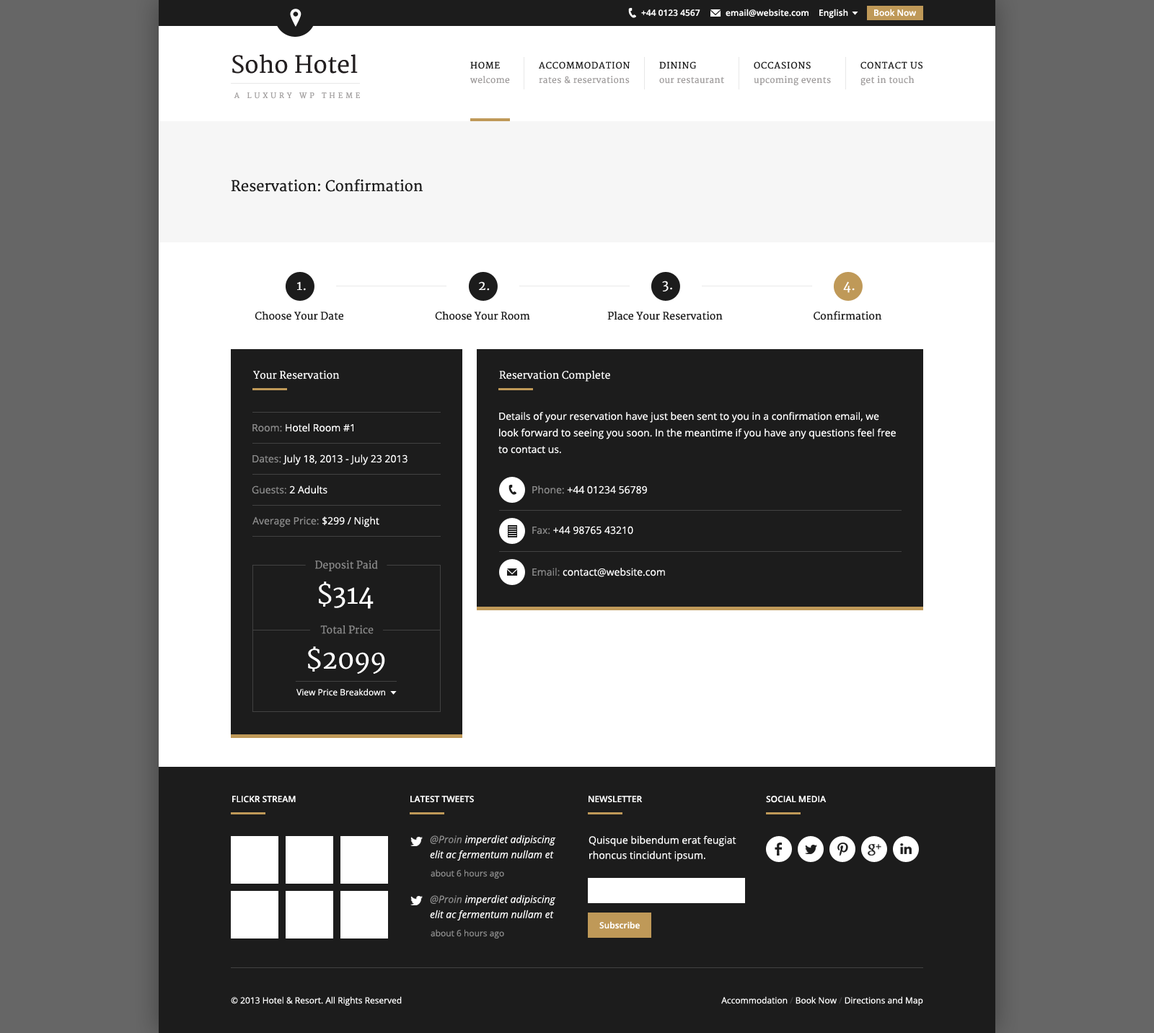
<style>
.page{position:relative;width:1154px;height:1033px;background:#1c1c1c}
.page>*{position:absolute;margin:0}
.t1{font:8.7px "OpenSans-Semibold";color:#ffffff}
.t2{font:23.1px "Merriweather";color:#231f20}
.t3{font:8.7px "Merriweather";letter-spacing:0.075em;color:#1c1c1c;text-transform:uppercase}
.t4{font:8.7px "Merriweather";letter-spacing:0.025em;color:#a09d9d}
.t5{font:7.2px "Merriweather";letter-spacing:0.4em;color:#a09d9d;text-transform:uppercase}
.t6{font:14.4px "Merriweather";color:#1c1c1c}
.t7{font:13px "Merriweather";color:#ffffff}
.t8{font:10.1px "Merriweather";color:#1c1c1c}
.t9{font:10.1px "Merriweather";color:#ffffff}
.t10{font:10.1px/16.6px "OpenSans";color:#ffffff}
.t11{font:10.1px "OpenSans";color:#ffffff}
.t12{font:10.1px "OpenSans";color:#8b8b8b}
.t13{font:10.1px "Merriweather";color:#8b8b8b}
.t14{font:26px "Merriweather";color:#ffffff}
.t15{font:8.7px "OpenSans";color:#ffffff}
.t16{font:8.7px "OpenSans-Semibold";color:#ffffff;text-transform:uppercase}
.t17{font:10.1px/15.1px "OpenSans-Italic";color:#ffffff}
.t18{font:10.1px/15.1px "OpenSans-Italic";color:#8b8b8b}
.t19{font:10.1px/15.1px "OpenSans";color:#ffffff}
.t20{font:8.7px "OpenSans";color:#8b8b8b}
.t21{font:8.7px "OpenSans";color:#424242}
</style>
<div class="page">
<p class="t1" style="left:641px;top:9px;width:59px;height:8px">+44 0123 4567</p>
<p class="t1" style="left:726px;top:9px;width:83px;height:8px">email@website.com</p>
<p class="t1" style="left:820px;top:9px;width:28px;height:9px">English</p>
<p class="t1" style="left:874px;top:9px;width:42px;height:8px">Book Now</p>
<p class="t2" style="left:232px;top:54px;width:126px;height:20px">Soho Hotel</p>
<p class="t3" style="left:470px;top:61px;width:30px;height:8px">Home</p>
<p class="t3" style="left:539px;top:61px;width:91px;height:8px">Accommodation</p>
<p class="t3" style="left:659px;top:61px;width:37px;height:8px">Dining</p>
<p class="t3" style="left:754px;top:61px;width:57px;height:8px">Occasions</p>
<p class="t3" style="left:861px;top:61px;width:62px;height:8px">Contact Us</p>
<p class="t4" style="left:470px;top:76px;width:40px;height:8px">welcome</p>
<p class="t4" style="left:539px;top:76px;width:91px;height:8px">rates &amp; reservations</p>
<p class="t4" style="left:659px;top:76px;width:65px;height:8px">our restaurant</p>
<p class="t4" style="left:754px;top:76px;width:77px;height:10px">upcoming events</p>
<p class="t4" style="left:861px;top:76px;width:54px;height:10px">get in touch</p>
<p class="t5" style="left:234px;top:92px;width:126px;height:7px">A Luxury WP Theme</p>
<p class="t6" style="left:231px;top:179px;width:192px;height:13px">Reservation: Confirmation</p>
<p class="t7" style="left:297px;top:281px;width:9px;height:10px">1.</p>
<p class="t7" style="left:479px;top:281px;width:11px;height:10px">2.</p>
<p class="t7" style="left:662px;top:281px;width:10px;height:10px">3.</p>
<p class="t7" style="left:843px;top:281px;width:12px;height:12px">4.</p>
<p class="t8" style="left:255px;top:311px;width:88px;height:9px">Choose Your Date</p>
<p class="t8" style="left:435px;top:311px;width:95px;height:9px">Choose Your Room</p>
<p class="t8" style="left:607px;top:311px;width:116px;height:9px">Place Your Reservation</p>
<p class="t8" style="left:814px;top:311px;width:68px;height:9px">Confirmation</p>
<p class="t9" style="left:253px;top:370px;width:87px;height:9px">Your Reservation</p>
<p class="t9" style="left:499px;top:370px;width:111px;height:12px">Reservation Complete</p>
<p class="t10" style="left:498px;top:412px;width:398px;height:42px">Details of your reservation have just been sent to you in a confirmation email, we <br>look forward to seeing you soon. In the meantime if you have any questions feel free <br>to contact us.</p>
<p class="t11" style="left:252px;top:423px;width:101px;height:9px"><span class="t12">Room:</span> Hotel Room #1</p>
<p class="t11" style="left:252px;top:454px;width:156px;height:11px"><span class="t12">Dates: </span>July 18, 2013 - July 23 2013</p>
<p class="t11" style="left:252px;top:486px;width:76px;height:8px"><span class="t12">Guests:</span> 2 Adults</p>
<p class="t11" style="left:532px;top:486px;width:115px;height:8px"><span class="t12">Phone:</span> +44 01234 56789</p>
<p class="t12" style="left:252px;top:517px;width:127px;height:10px">Average Price: <span class="t11">$299 / Night</span></p>
<p class="t11" style="left:532px;top:526px;width:101px;height:9px"><span class="t12">Fax: </span>+44 98765 43210</p>
<p class="t13" style="left:315px;top:560px;width:63px;height:11px">Deposit Paid</p>
<p class="t11" style="left:532px;top:568px;width:133px;height:9px"><span class="t12">Email: </span>contact@website.com</p>
<p class="t14" style="left:319px;top:581px;width:55px;height:28px">$314</p>
<p class="t13" style="left:320px;top:625px;width:54px;height:9px">Total Price</p>
<p class="t14" style="left:308px;top:646px;width:77px;height:28px">$2099</p>
<p class="t15" style="left:297px;top:688px;width:88px;height:8px">View Price Breakdown</p>
<p class="t16" style="left:232px;top:796px;width:64px;height:7px">Flickr Stream</p>
<p class="t16" style="left:410px;top:796px;width:64px;height:7px">Latest Tweets</p>
<p class="t16" style="left:589px;top:796px;width:54px;height:7px">Newsletter</p>
<p class="t16" style="left:766px;top:796px;width:61px;height:7px">Social Media</p>
<p class="t17" style="left:430px;top:835px;width:126px;height:26px"><span class="t18">@Proin </span>imperdiet adipiscing elit ac fermentum nullam et</p>
<p class="t19" style="left:589px;top:835px;width:148px;height:26px">Quisque bibendum erat feugiat rhoncus tincidunt ipsum.</p>
<p class="t20" style="left:431px;top:869px;width:73px;height:10px">about 6 hours ago</p>
<p class="t17" style="left:430px;top:895px;width:126px;height:26px"><span class="t18">@Proin</span> imperdiet adipiscing elit ac fermentum nullam et</p>
<p class="t20" style="left:431px;top:929px;width:73px;height:10px">about 6 hours ago</p>
<p class="t1" style="left:599px;top:921px;width:41px;height:8px">Subscribe</p>
<p class="t15" style="left:231px;top:996px;width:171px;height:10px">© 2013 Hotel &amp; Resort. All Rights Reserved</p>
<p class="t15" style="left:721px;top:996px;width:202px;height:10px">Accommodation <span class="t21">/</span> Book Now <span class="t21">/</span> Directions and Map</p>
</div>
